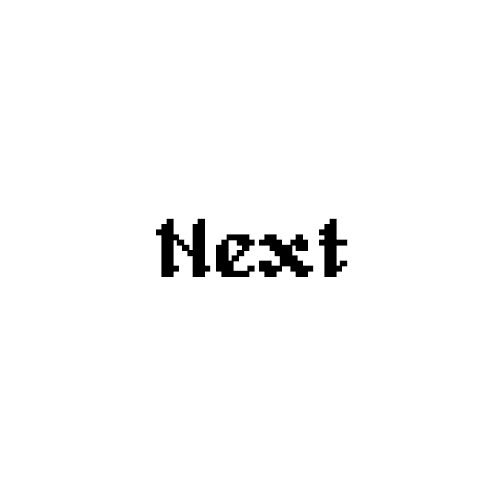
<style>
.page{position:relative;width:500px;height:500px;background:#ffffff}
.page>*{position:absolute;margin:0}
.t1{font:83.2px "Alagard";color:#000000;font-weight:bold}
</style>
<div class="page">
<p class="t1" style="left:156px;top:218px;width:192px;height:59px">Next</p>
</div>
